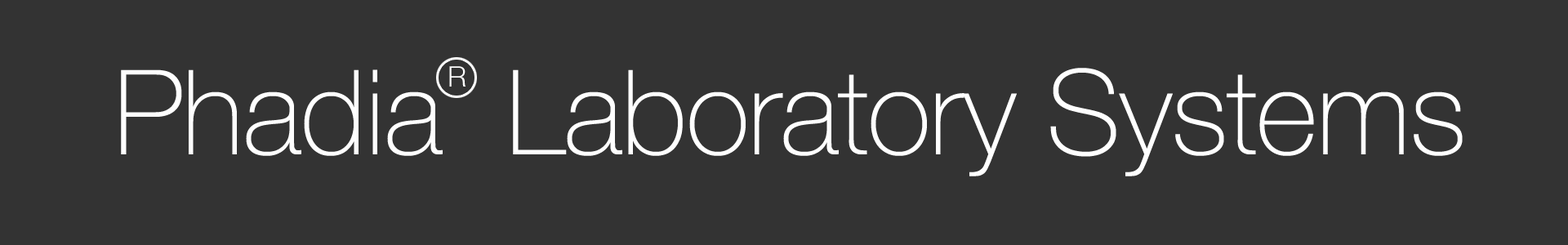
<style>
.page{position:relative;width:1568px;height:245px;background:#333333}
.page>*{position:absolute;margin:0}
.t1{font:118.3px "HelveticaNeueLTCom-Th";letter-spacing:-0.01em;color:#ffffff}
.t2{font:28.3px "HelveticaNeueLTCom-Lt";color:#ffffff}
</style>
<div class="page">
<p class="t1" style="left:121px;top:68px;width:1342px;height:108px">Phadia  Laboratory Systems</p>
<p class="t2" style="left:449px;top:66px;width:17px;height:21px">R</p>
</div>
